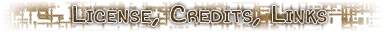
<style>
.page{position:relative;width:384px;height:32px;background:#ffffff}
.page>*{position:absolute;margin:0}
.t1{font:24px "ShortStack";color:#5c3c11;font-variant:small-caps;font-weight:bold}
</style>
<div class="page">
<p class="t1" style="left:73px;top:5px;width:254px;height:21px">License, Credits, Links</p>
</div>
